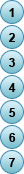
<style>
.page{position:relative;width:24px;height:174px}
.page>*{position:absolute;margin:0}
.t1{font:12px "Arial-BoldMT";color:#000000}
</style>
<div class="page">
<p class="t1" style="left:9px;top:8px;width:5px;height:9px">1</p>
<p class="t1" style="left:9px;top:33px;width:6px;height:9px">2</p>
<p class="t1" style="left:9px;top:58px;width:6px;height:9px">3</p>
<p class="t1" style="left:8px;top:83px;width:8px;height:9px">4</p>
<p class="t1" style="left:9px;top:108px;width:7px;height:9px">5</p>
<p class="t1" style="left:9px;top:133px;width:7px;height:9px">6</p>
<p class="t1" style="left:9px;top:158px;width:6px;height:9px">7</p>
</div>
